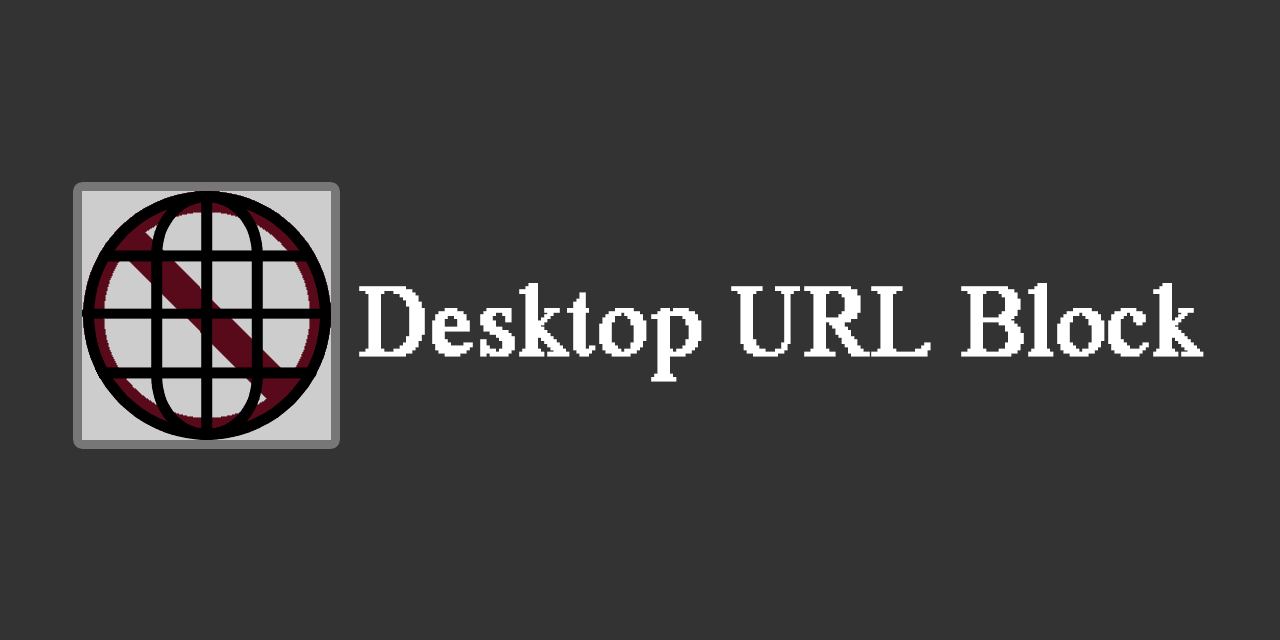
<style>
.page{position:relative;width:1280px;height:640px;background:#333333}
.page>*{position:absolute;margin:0}
.t1{font:100px "MS Serif";letter-spacing:0.01em;color:#ffffff;font-weight:bold}
</style>
<div class="page">
<p class="t1" style="left:359px;top:283px;width:845px;height:99px">Desktop URL Block</p>
</div>
